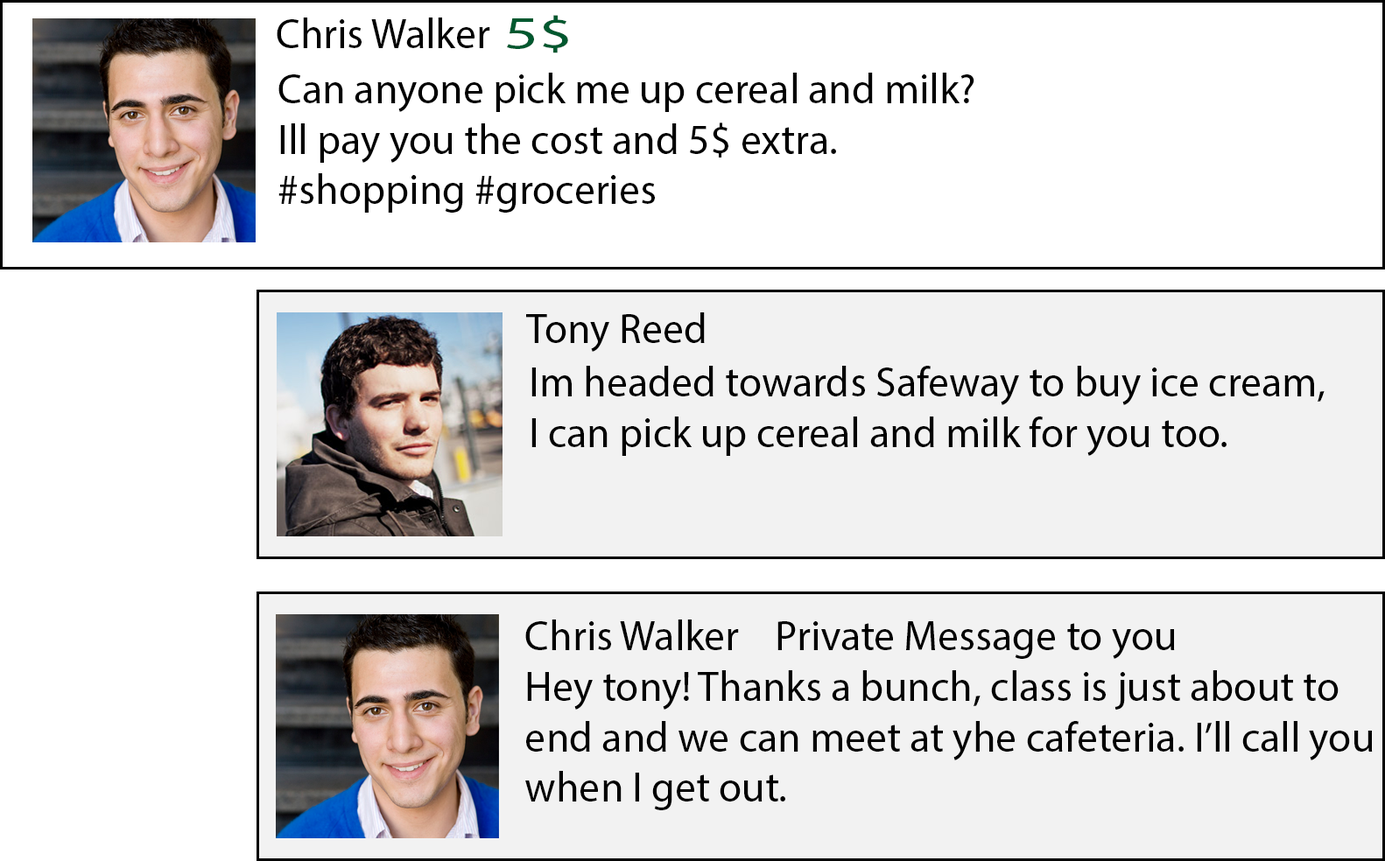
<style>
.page{position:relative;width:1385px;height:861px;background:#ffffff}
.page>*{position:absolute;margin:0}
.t1{font:42px "MyriadPro-Regular";color:#000000}
.t2{font:45.9px "MyriadPro-Regular";color:#00582f;scale:1.47 1}
</style>
<div class="page">
<p class="t1" style="left:277px;top:18px;width:213px;height:30px">Chris Walker</p>
<p class="t2" style="left:507px;top:15px;width:61px;height:38px">5$</p>
<p class="t1" style="left:278px;top:73px;width:696px;height:140px">Can anyone pick me up cereal and milk? <br>Ill pay you the cost and 5$ extra.<br>#shopping #groceries</p>
<p class="t1" style="left:526px;top:312px;width:179px;height:40px">Tony Reed</p>
<p class="t1" style="left:531px;top:366px;width:793px;height:90px">Im headed towards Safeway to buy ice cream, <br>I can pick up cereal and milk for you too.</p>
<p class="t1" style="left:525px;top:620px;width:650px;height:39px">Chris Walker    Private Message to you</p>
<p class="t1" style="left:525px;top:670px;width:847px;height:140px">Hey tony! Thanks a bunch, class is just about to<br>end and we can meet at yhe cafeteria. I’ll call you<br>when I get out.</p>
</div>
